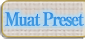
<style>
.page{position:relative;width:85px;height:39px}
.page>*{position:absolute;margin:0}
.t1{font:18px "RyuminPro-ExBold";letter-spacing:-0.12em;color:#54aae4;font-weight:bold;scale:0.9 1}
</style>
<div class="page">
<p class="t1" style="left:5px;top:12px;width:79px;height:14px">Muat Preset</p>
</div>
